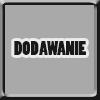
<style>
.page{position:relative;width:100px;height:100px;background:#a9a9a9}
.page>*{position:absolute;margin:0}
.t1{font:18px "PoplarStd";color:#181818}
</style>
<div class="page">
<p class="t1" style="left:14px;top:41px;width:72px;height:14px">DODAWANIE</p>
</div>
